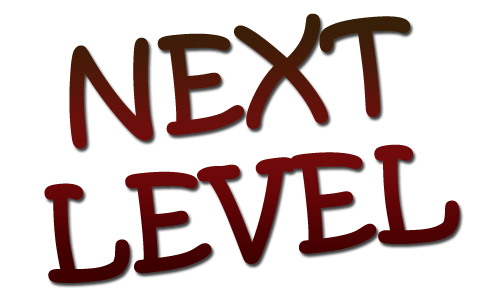
<style>
.page{position:relative;width:500px;height:300px;background:#ffffff}
.page>*{position:absolute;margin:0}
.t1{font:111.1px "KristenITC-Regular";font-weight:bold}
</style>
<div class="page">
<p class="t1" style="left:44px;top:13px;width:416px;height:270px;text-align:center;rotate:-7deg">NEXT<br>LEVEL</p>
</div>
